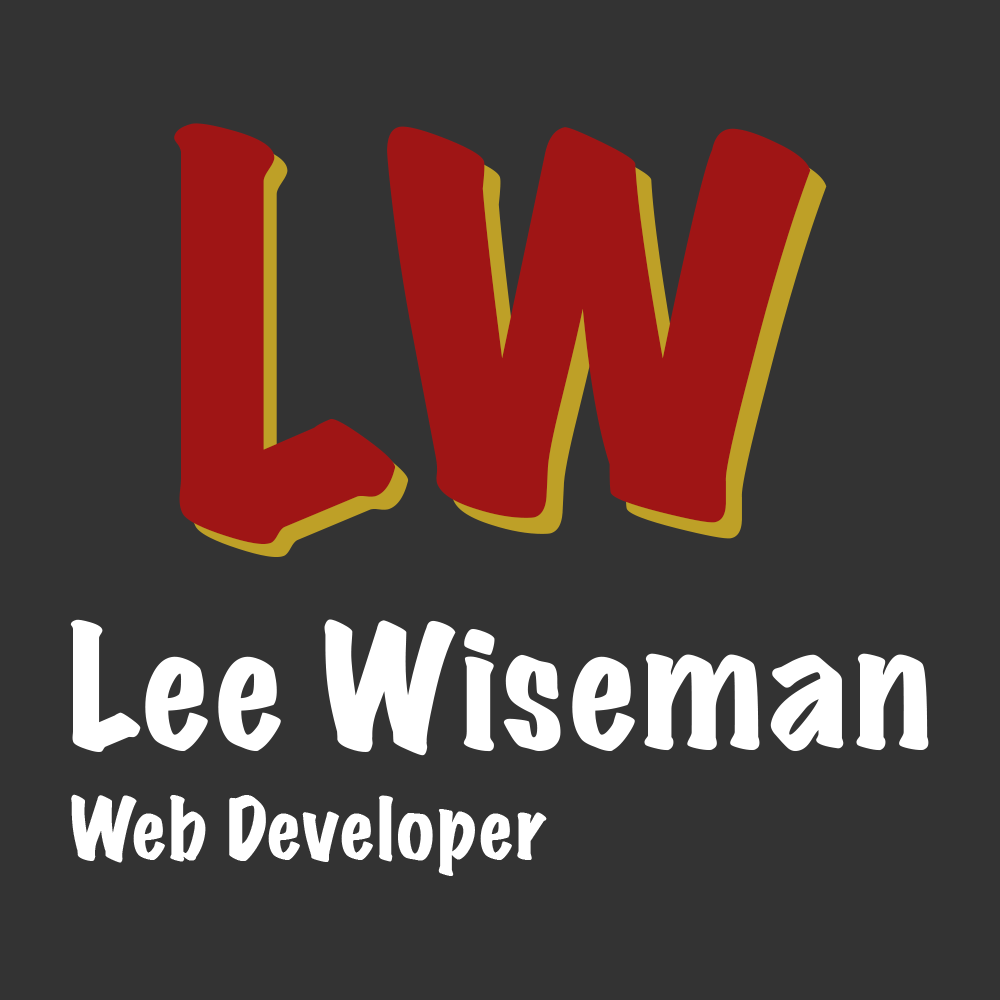
<style>
.page{position:relative;width:1000px;height:1000px;background:#333333}
.page>*{position:absolute;margin:0}
.t1{font:486.1px "MarkerFelt-Wide";color:#9f1515}
.t2{font:625px "MarkerFelt-Wide";color:#9f1515}
.t3{font:152.8px "MarkerFelt-Wide";color:#ffffff}
.t4{font:76.4px "MarkerFelt-Wide";color:#ffffff}
</style>
<div class="page">
<p class="t1" style="left:174px;top:123px;width:222px;height:421px">L</p>
<p class="t2" style="left:387px;top:126px;width:424px;height:397px">w</p>
<p class="t1" style="left:187px;top:136px;width:222px;height:421px">L</p>
<p class="t2" style="left:403px;top:142px;width:424px;height:397px">w</p>
<p class="t3" style="left:70px;top:619px;width:859px;height:137px">Lee Wiseman</p>
<p class="t4" style="left:71px;top:794px;width:476px;height:82px">Web Developer</p>
</div>
